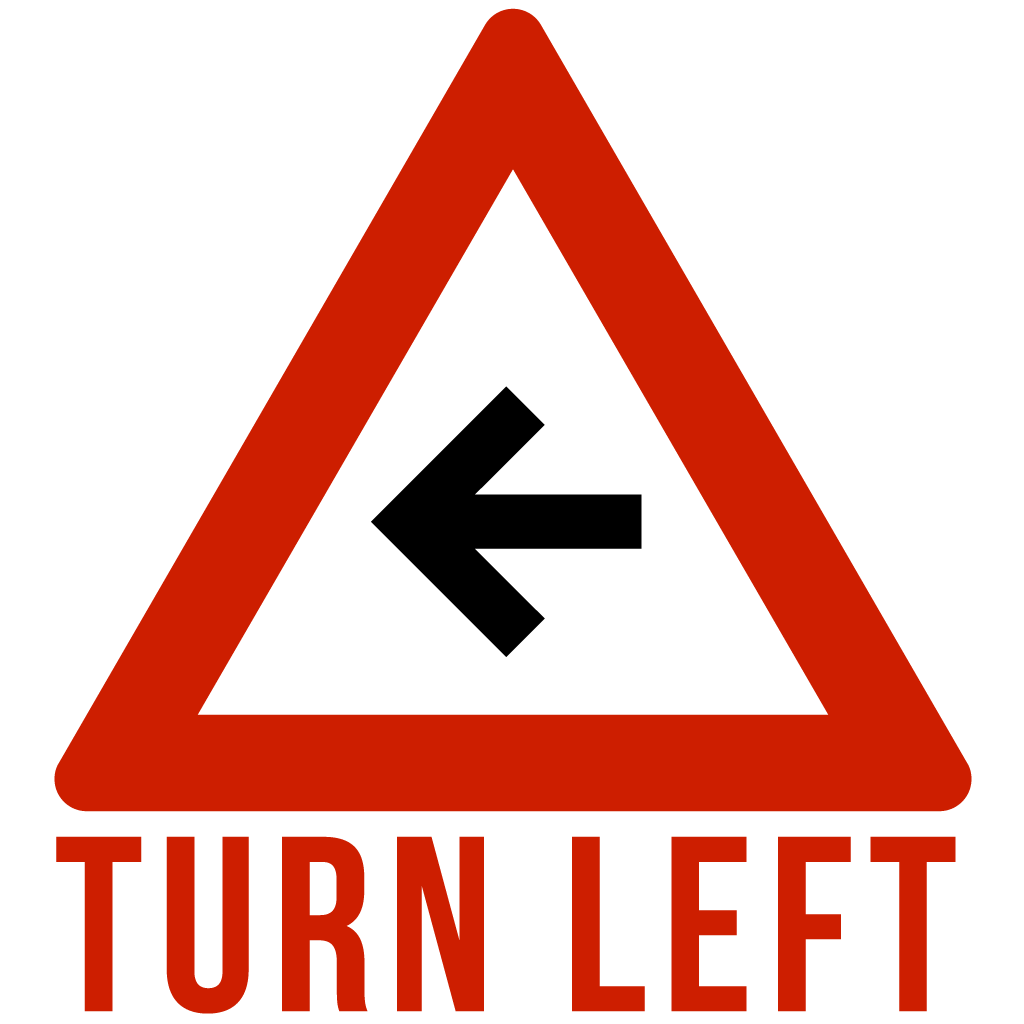
<style>
.page{position:relative;width:1024px;height:1024px;background:#ffffff}
.page>*{position:absolute;margin:0}
.t1{font:249.1px "BebasNeueBold";letter-spacing:0.06em;color:#cd1e00}
</style>
<div class="page">
<p class="t1" style="left:56px;top:836px;width:900px;height:178px">TURN LEFT</p>
</div>
